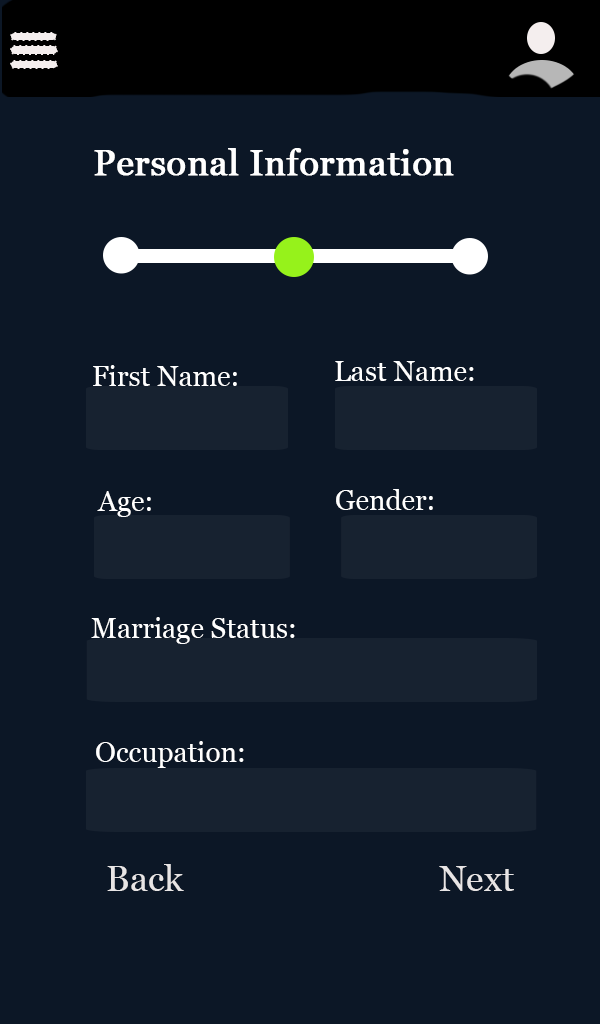
<style>
.page{position:relative;width:600px;height:1024px;background:#0c1726}
.page>*{position:absolute;margin:0}
.t1{font:36px "Georgia";color:#ffffff;font-weight:bold}
.t2{font:28px "Georgia";color:#ffffff}
.t3{font:28px "Georgia";color:#ffffff;text-transform:uppercase}
.t4{font:36px "Georgia";color:#e8e5e5}
</style>
<div class="page">
<p class="t1" style="left:94px;top:148px;width:360px;height:28px">Personal Information</p>
<p class="t2" style="left:93px;top:365px;width:144px;height:21px"><span class="t3">F</span>irst Name<span class="t3">:</span></p>
<p class="t2" style="left:335px;top:361px;width:139px;height:20px">Last Name<span class="t3">:</span></p>
<p class="t2" style="left:97px;top:491px;width:54px;height:26px">Age:</p>
<p class="t2" style="left:336px;top:489px;width:97px;height:21px">Gender:</p>
<p class="t2" style="left:91px;top:617px;width:204px;height:27px">Marriage Status:</p>
<p class="t2" style="left:96px;top:741px;width:148px;height:27px">Occupation:</p>
<p class="t4" style="left:107px;top:864px;width:77px;height:27px">Back</p>
<p class="t4" style="left:439px;top:866px;width:75px;height:25px">Next</p>
</div>
